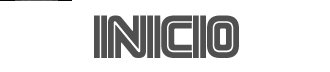
<style>
.page{position:relative;width:330px;height:72px;background:#ffffff}
.page>*{position:absolute;margin:0}
.t1{font:50px "MrRobot";letter-spacing:-0.04em;color:#555555}
</style>
<div class="page">
<p class="t1" style="left:94px;top:15px;width:145px;height:43px">Inicio</p>
</div>
